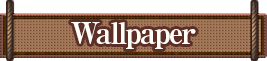
<style>
.page{position:relative;width:267px;height:61px;background:#ffffff}
.page>*{position:absolute;margin:0}
.t1{font:30px "RyuminPro-ExBold";letter-spacing:-0.08em;color:#fffff7}
</style>
<div class="page">
<p class="t1" style="left:71px;top:22px;width:125px;height:27px">Wallpaper</p>
</div>
